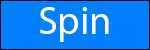
<style>
.page{position:relative;width:150px;height:50px;background:#0080ff}
.page>*{position:absolute;margin:0}
.t1{font:40px "MyriadPro-Regular";color:#ffffff}
</style>
<div class="page">
<p class="t1" style="left:40px;top:7px;width:69px;height:35px">Spin</p>
</div>
